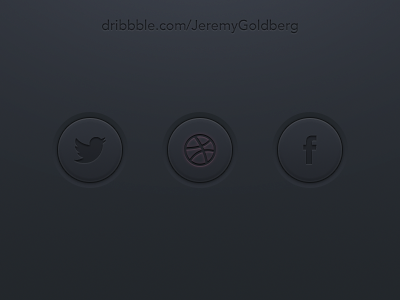
<style>
.page{position:relative;width:400px;height:300px}
.page>*{position:absolute;margin:0}
.t1{font:14px "Avenir-Medium";color:#1c1e22}
.t2{font:36px "FacebookLetterFaces";color:#1f2228}
</style>
<div class="page">
<p class="t1" style="left:102px;top:19px;width:196px;height:15px">dribbble.com/JeremyGoldberg</p>
<p class="t2" style="left:303px;top:135px;width:14px;height:29px">f</p>
</div>
